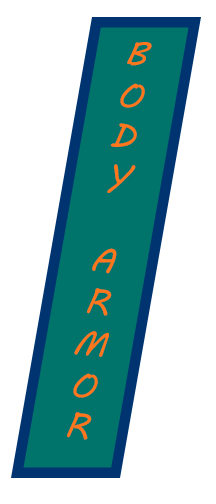
<style>
.page{position:relative;width:216px;height:504px;background:#ffffff}
.page>*{position:absolute;margin:0}
.t1{font:35px "MVBoli";color:#ff761b}
</style>
<div class="page">
<p class="t1" style="left:67px;top:42px;width:85px;height:398px;text-align:center;rotate:9deg">B<br>O<br>D<br>Y<br><br>A<br>R<br>M<br>O<br>R</p>
</div>
